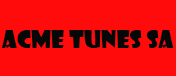
<style>
.page{position:relative;width:176px;height:76px;background:#ff0b0b}
.page>*{position:absolute;margin:0}
.t1{font:24px "ShowcardGothic-Reg";color:#060707}
</style>
<div class="page">
<p class="t1" style="left:1px;top:30px;width:173px;height:19px">Acme Tunes SA</p>
</div>
